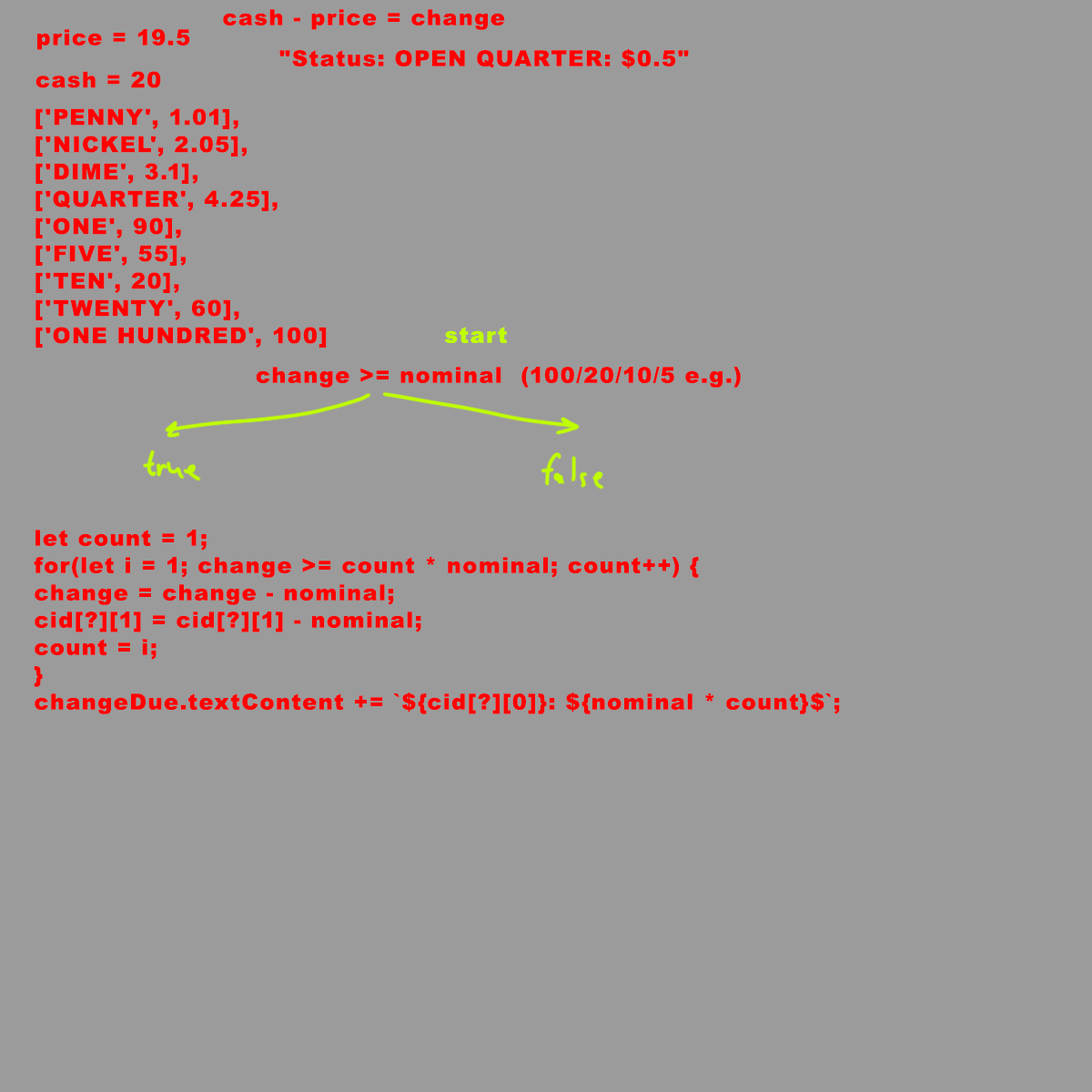
<style>
.page{position:relative;width:1092px;height:1092px;background:#9b9b9b}
.page>*{position:absolute;margin:0}
.t1{font:21.8px "Arial-Black";letter-spacing:0.06em;color:#ff0000}
.t2{font:21.8px/27.3px "Arial-Black";letter-spacing:0.06em;color:#ff0000}
.t3{font:21.8px "Arial-Black";letter-spacing:0.06em;color:#c0ff00}
</style>
<div class="page">
<p class="t1" style="left:223px;top:9px;width:282px;height:21px">cash - price = change</p>
<p class="t1" style="left:37px;top:29px;width:153px;height:21px">price = 19.5</p>
<p class="t1" style="left:279px;top:49px;width:410px;height:20px">"Status: OPEN QUARTER: $0.5"</p>
<p class="t1" style="left:35px;top:71px;width:126px;height:17px">cash = 20</p>
<p class="t2" style="left:35px;top:108px;width:292px;height:240px">['PENNY', 1.01],<br>  ['NICKEL', 2.05],<br>  ['DIME', 3.1],<br>  ['QUARTER', 4.25],<br>  ['ONE', 90],<br>  ['FIVE', 55],<br>  ['TEN', 20],<br>  ['TWENTY', 60],<br>  ['ONE HUNDRED', 100]</p>
<p class="t3" style="left:445px;top:327px;width:62px;height:16px">start</p>
<p class="t1" style="left:256px;top:367px;width:485px;height:21px">change &gt;= nominal  (100/20/10/5 e.g.)</p>
<p class="t2" style="left:34px;top:530px;width:806px;height:184px">let count = 1;<br>for(let i = 1; change &gt;= count * nominal; count++) {<br>change = change - nominal;<br>cid[?][1] = cid[?][1] - nominal;<br>count = i;<br>}<br>changeDue.textContent += `${cid[?][0]}: ${nominal * count}$`;</p>
</div>
